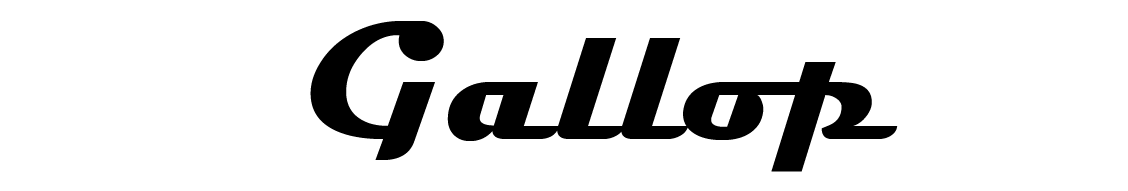
<style>
.page{position:relative;width:1128px;height:191px;background:#ffffff}
.page>*{position:absolute;margin:0}
.t1{font:172px "Magneto-Bold";color:#000000}
</style>
<div class="page">
<p class="t1" style="left:310px;top:21px;width:588px;height:151px">Gallop</p>
</div>
